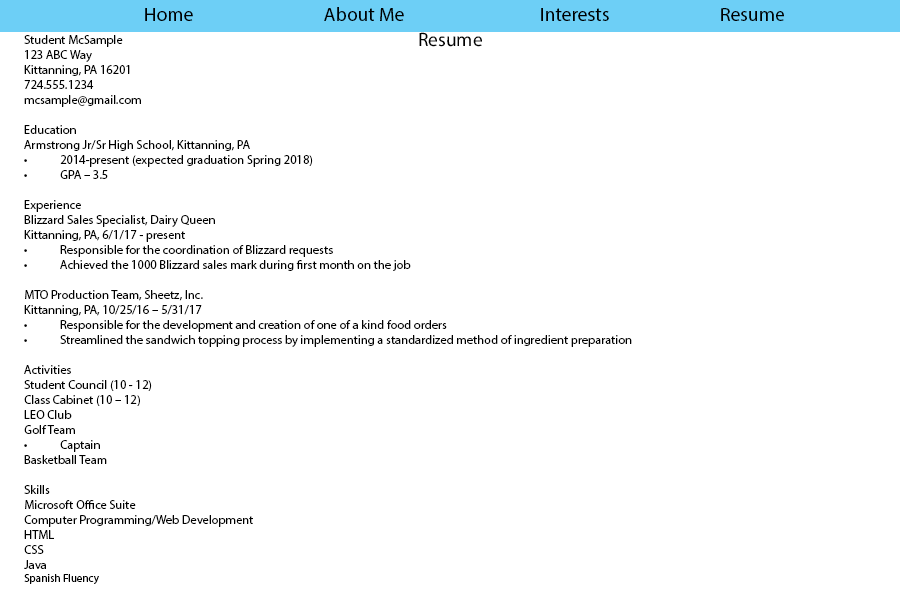
<style>
.page{position:relative;width:900px;height:600px;background:#ffffff}
.page>*{position:absolute;margin:0}
.t1{font:19.4px "MyriadPro-Regular";color:#000000}
.t2{font:12.5px "MyriadPro-Regular";color:#000000}
.t3{font:11.1px "MyriadPro-Regular";color:#000000}
</style>
<div class="page">
<p class="t1" style="left:145px;top:7px;width:639px;height:14px">Home    About Me    Interests    Resume</p>
<p class="t2" style="left:24px;top:35px;width:608px;height:549px">Student McSample<br>123 ABC Way<br>Kittanning, PA 16201<br>724.555.1234<br>mcsample@gmail.com<br><br>Education<br>Armstrong Jr/Sr High School, Kittanning, PA<br>• 2014-present (expected graduation Spring 2018)<br>• GPA – 3.5<br><br>Experience<br>Blizzard Sales Specialist, Dairy Queen<br>Kittanning, PA, 6/1/17 - present<br>• Responsible for the coordination of Blizzard requests<br>• Achieved the 1000 Blizzard sales mark during first month on the job<br><br>MTO Production Team, Sheetz, Inc.<br>Kittanning, PA, 10/25/16 – 5/31/17<br>• Responsible for the development and creation of one of a kind food orders<br>• Streamlined the sandwich topping process by implementing a standardized method of ingredient preparation<br><br>Activities<br>Student Council (10 - 12)<br>Class Cabinet (10 – 12)<br>LEO Club<br>Golf Team<br>• Captain<br>Basketball Team<br><br>Skills<br>Microsoft Office Suite<br>Computer Programming/Web Development<br>HTML<br>CSS<br>Java<br><span class="t3">Spanish Fluency</span></p>
<p class="t1" style="left:419px;top:32px;width:63px;height:15px">Resume</p>
</div>
